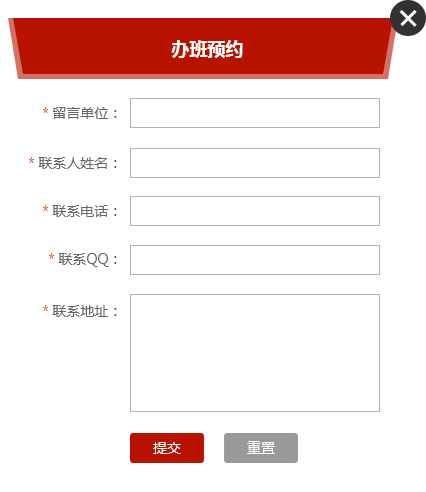
<style>
.page{position:relative;width:426px;height:492px;background:#ffffff}
.page>*{position:absolute;margin:0}
.t1{font:18px "MicrosoftYaHei-Bold";color:#ffffff}
.t2{font:14px "MicrosoftYaHei";color:#646464}
.t3{font:14px "MicrosoftYaHei";color:#e05917}
.t4{font:14px "MicrosoftYaHei";color:#ffffff}
</style>
<div class="page">
<p class="t1" style="left:171px;top:40px;width:72px;height:18px">办班预约</p>
<p class="t2" style="left:43px;top:107px;width:74px;height:12px"><span class="t3">* </span>留言单位：</p>
<p class="t2" style="left:29px;top:157px;width:88px;height:12px"><span class="t3">* </span>联系人姓名：</p>
<p class="t2" style="left:43px;top:205px;width:74px;height:12px"><span class="t3">* </span>联系电话：</p>
<p class="t2" style="left:49px;top:253px;width:68px;height:14px"><span class="t3">* </span>联系QQ：</p>
<p class="t2" style="left:43px;top:305px;width:74px;height:12px"><span class="t3">* </span>联系地址：</p>
<p class="t4" style="left:153px;top:442px;width:28px;height:12px">提交</p>
<p class="t4" style="left:247px;top:441px;width:28px;height:13px">重置</p>
</div>
